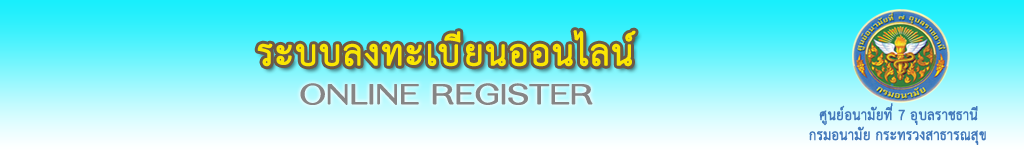
<style>
.page{position:relative;width:1024px;height:150px}
.page>*{position:absolute;margin:0}
.t1{font:51px "THSarabunPSK";letter-spacing:0.02em;color:#fae602;font-weight:bold}
.t2{font:41px "THFahkwang";color:#868585;font-weight:bold;scale:1.03 1}
.t3{font:20.6px "THSarabunPSK";color:#4379bb;font-weight:bold;scale:0.93 1}
</style>
<div class="page">
<p class="t1" style="left:257px;top:30px;width:379px;height:37px">ระบบลงทะเบียนออนไลน์</p>
<p class="t2" style="left:300px;top:83px;width:293px;height:22px">ONLINE REGISTER</p>
<p class="t3" style="left:819px;top:103px;width:159px;height:23px">ศูนย์อนามัยที่ 7 อุบลราชธานี</p>
<p class="t3" style="left:809px;top:126px;width:177px;height:19px">กรมอนามัย กระทรวงสาธารณสุข</p>
</div>
